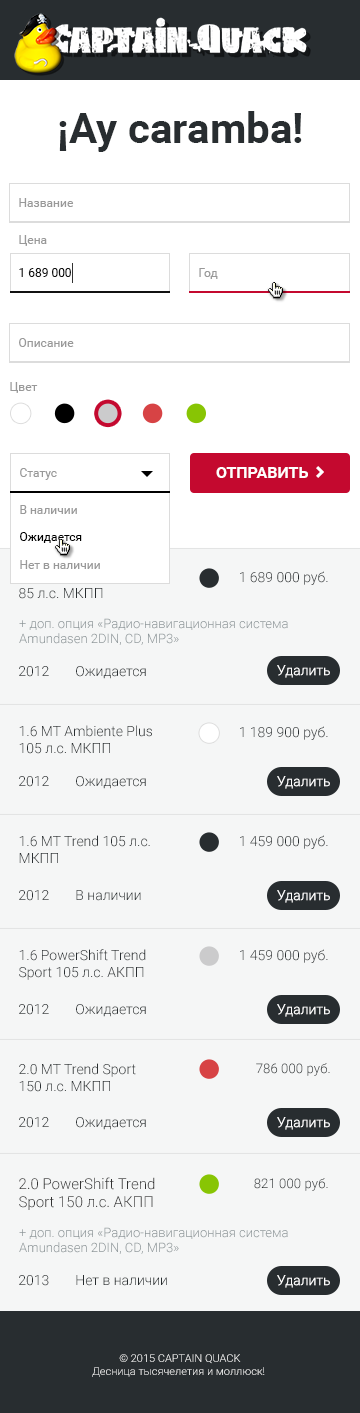
<style>
.page{position:relative;width:360px;height:1413px;background:#f5f6f6}
.page>*{position:absolute;margin:0}
.t1{font:42px "Roboto-Bold";color:#282d30}
.t2{font:12px "Roboto-Regular";color:#999999}
.t3{font:12px "Roboto-Regular";color:#111111}
.t4{font:16px "Roboto-Bold";color:#ffffff;text-transform:uppercase}
.t5{font:12px/18px "Roboto-Regular";color:#999999}
.t6{font:12px/18px "Roboto-Regular";color:#000000}
.t7{font:14px "Roboto-Light";color:#282d30}
.t8{font:13px "Roboto-Light";color:#8b9497}
.t9{font:14px "Roboto-Light";color:#ffffff}
.t10{font:13.3px "Roboto-Light"}
.t11{font:15px "Roboto-Light";color:#323232}
.t12{font:13.3px "Roboto-Light";color:#282d30}
.t13{font:11px "Roboto-Light"}
</style>
<div class="page">
<p class="t1" style="left:59px;top:111px;width:243px;height:41px">¡Ay caramba!</p>
<p class="t2" style="left:19px;top:198px;width:55px;height:9px">Название</p>
<p class="t2" style="left:19px;top:235px;width:28px;height:11px">Цена</p>
<p class="t3" style="left:19px;top:268px;width:52px;height:9px">1 689 000</p>
<p class="t2" style="left:199px;top:268px;width:19px;height:11px">Год</p>
<p class="t2" style="left:19px;top:338px;width:55px;height:9px">Описание</p>
<p class="t2" style="left:10px;top:382px;width:28px;height:11px">Цвет</p>
<p class="t2" style="left:20px;top:468px;width:37px;height:12px">Статус</p>
<p class="t4" style="left:216px;top:467px;width:92px;height:11px">Отправить</p>
<p class="t5" style="left:20px;top:505px;width:80px;height:64px">В наличии<br><span class="t6">Ожидается<br></span>Нет в наличии</p>
<p class="t7" style="left:19px;top:570px;width:104px;height:29px">1.6 MT Ambiente<br>85 л.с. МКПП</p>
<p class="t7" style="left:240px;top:571px;width:88px;height:14px">1 689 000 руб.</p>
<p class="t8" style="left:19px;top:618px;width:269px;height:27px">+ доп. опция «Радио-навигационная система Amundasen 2DIN, CD, MP3»</p>
<p class="t9" style="left:277px;top:665px;width:53px;height:13px">Удалить</p>
<p class="t7" style="left:19px;top:666px;width:30px;height:11px">2012</p>
<p class="t7" style="left:76px;top:666px;width:70px;height:13px">Ожидается</p>
<p class="t7" style="left:19px;top:725px;width:133px;height:29px">1.6 MT Ambiente Plus<br>105 л.с. МКПП</p>
<p class="t7" style="left:240px;top:726px;width:88px;height:14px">1 189 900 руб.</p>
<p class="t7" style="left:19px;top:776px;width:30px;height:11px">2012</p>
<p class="t7" style="left:76px;top:776px;width:70px;height:13px">Ожидается</p>
<p class="t9" style="left:277px;top:776px;width:53px;height:13px">Удалить</p>
<p class="t7" style="left:19px;top:835px;width:131px;height:28px">1.6 MT Trend 105 л.с.<br>МКПП</p>
<p class="t7" style="left:240px;top:835px;width:88px;height:14px">1 459 000 руб.</p>
<p class="t7" style="left:19px;top:890px;width:30px;height:11px">2012</p>
<p class="t7" style="left:76px;top:890px;width:65px;height:11px">В наличии</p>
<p class="t9" style="left:277px;top:890px;width:53px;height:13px">Удалить</p>
<p class="t7" style="left:19px;top:949px;width:127px;height:31px">1.6 PowerShift Trend<br>Sport 105 л.с. АКПП</p>
<p class="t7" style="left:240px;top:949px;width:88px;height:14px">1 459 000 руб.</p>
<p class="t7" style="left:19px;top:1004px;width:30px;height:11px">2012</p>
<p class="t7" style="left:76px;top:1004px;width:70px;height:13px">Ожидается</p>
<p class="t9" style="left:277px;top:1004px;width:53px;height:13px">Удалить</p>
<p class="t7" style="left:19px;top:1063px;width:117px;height:29px">2.0 MT Trend Sport<br>150 л.с. МКПП</p>
<p class="t10" style="left:256px;top:1063px;width:74px;height:13px">786 000 руб.</p>
<p class="t7" style="left:19px;top:1117px;width:30px;height:11px">2012</p>
<p class="t7" style="left:76px;top:1117px;width:70px;height:13px">Ожидается</p>
<p class="t9" style="left:277px;top:1117px;width:53px;height:13px">Удалить</p>
<p class="t11" style="left:19px;top:1177px;width:136px;height:33px">2.0 PowerShift Trend<br>Sport 150 л.с. АКПП</p>
<p class="t12" style="left:254px;top:1178px;width:74px;height:13px">821 000 руб.</p>
<p class="t8" style="left:19px;top:1227px;width:269px;height:27px">+ доп. опция «Радио-навигационная система Amundasen 2DIN, CD, MP3»</p>
<p class="t7" style="left:19px;top:1275px;width:30px;height:11px">2013</p>
<p class="t7" style="left:76px;top:1275px;width:91px;height:11px">Нет в наличии</p>
<p class="t9" style="left:277px;top:1275px;width:53px;height:13px">Удалить</p>
<p class="t13" style="left:92px;top:1354px;width:173px;height:23px;text-align:center">© 2015 CAPTAIN QUACK<br>Десница тысячелетия и моллюск!</p>
</div>
